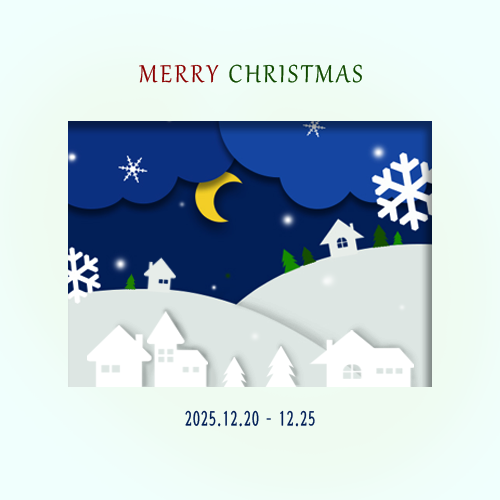
<style>
.page{position:relative;width:500px;height:500px}
.page>*{position:absolute;margin:0}
.t1{font:30px "Gabriola";letter-spacing:0.1em;color:#114800;scale:0.93 1}
.t2{font:30px "Gabriola";letter-spacing:0.1em;color:#8c0000;scale:0.93 1}
.t3{font:20.4px "SeoulHangangCB";letter-spacing:0.12em;color:#021f57;scale:0.69 1}
</style>
<div class="page">
<p class="t1" style="left:139px;top:64px;width:223px;height:19px"><span class="t2">MERRY </span>CHRISTMAS</p>
<p class="t3" style="left:185px;top:410px;width:130px;height:17px">2025.12.20 – 12.25</p>
</div>
